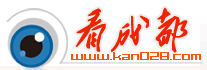
<style>
.page{position:relative;width:207px;height:70px;background:#ffffff}
.page>*{position:absolute;margin:0}
.t1{font:40.7px "²ÝÌ´Õ«Ã«Ôó¶«×ÖÌå";color:#f12200}
.t2{font:9px "GrixelAcme7Wide";color:#ff550a;font-weight:bold}
</style>
<div class="page">
<p class="t1" style="left:75px;top:7px;width:113px;height:46px">看成都</p>
<p class="t2" style="left:71px;top:52px;width:130px;height:8px">www.kan028.com</p>
</div>
